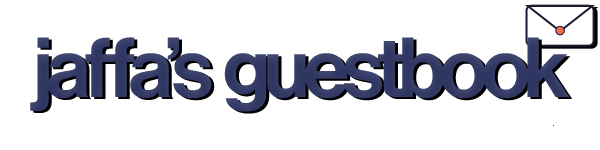
<style>
.page{position:relative;width:600px;height:150px;background:#ffffff}
.page>*{position:absolute;margin:0}
.t1{font:83.3px "NeueHaasDisplay-Mediu";letter-spacing:-0.07em;color:#2e3561}
</style>
<div class="page">
<p class="t1" style="left:30px;top:37px;width:540px;height:75px">jaffa’s  guestbook</p>
</div>
